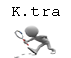
<style>
.page{position:relative;width:71px;height:58px;background:#ffffff}
.page>*{position:absolute;margin:0}
.t1{font:12px "CourierNewPSMT";color:#000000}
</style>
<div class="page">
<p class="t1" style="left:12px;top:7px;width:48px;height:9px">K.tra</p>
</div>
